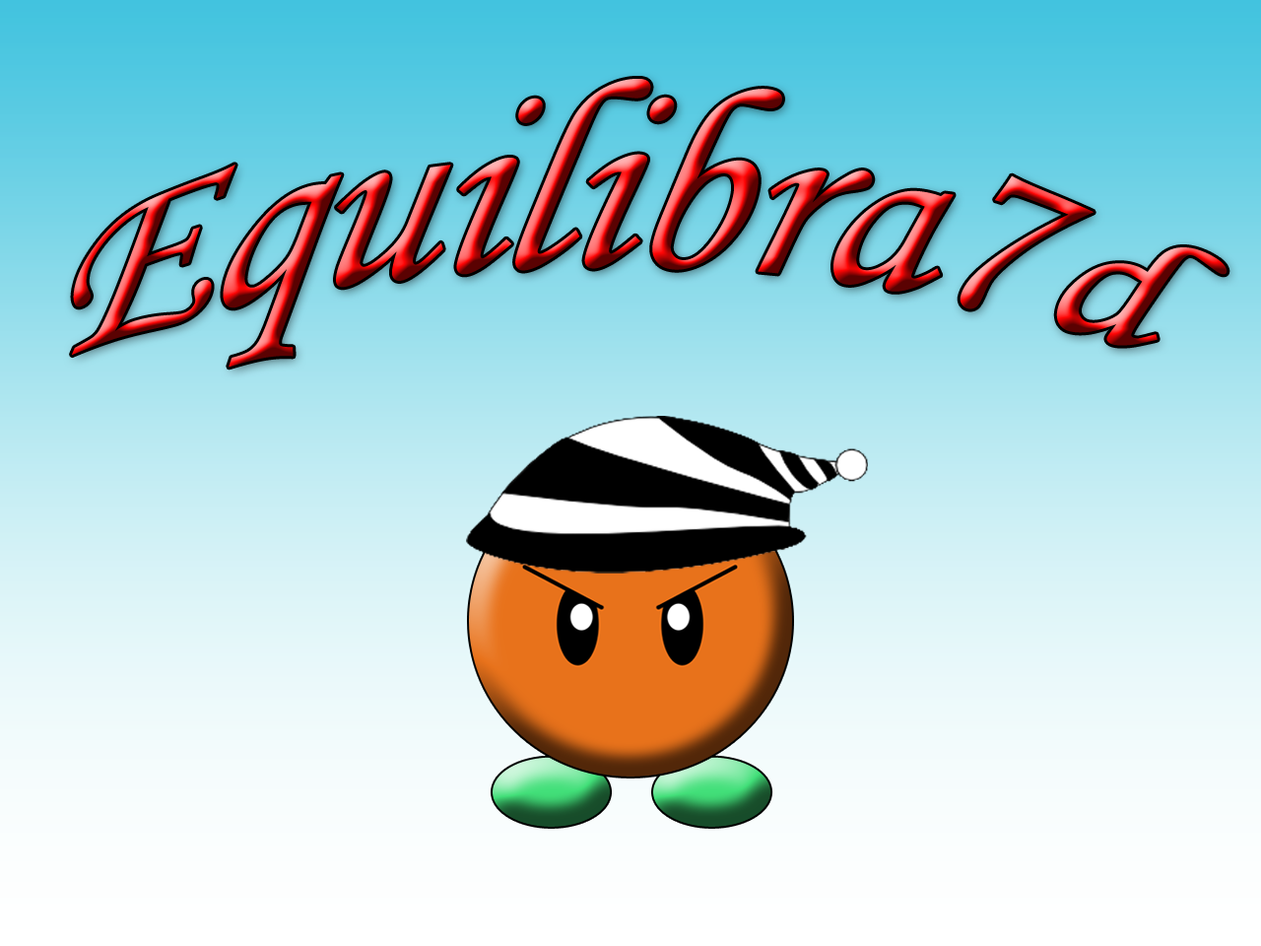
<style>
.page{position:relative;width:1261px;height:946px}
.page>*{position:absolute;margin:0}
.t1{font:173.7px "MonotypeCorsiva";letter-spacing:0.005em;font-style:italic;scale:1.5 1}
</style>
<div class="page">
<p class="t1" style="left:72px;top:79px;width:1155px;height:288px">Equilibra7d</p>
</div>
